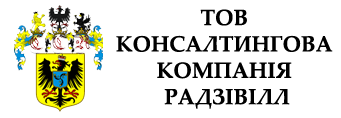
<style>
.page{position:relative;width:341px;height:118px;background:#ffffff}
.page>*{position:absolute;margin:0}
.t1{font:22px "PalatinoLinotype-Bold";color:#000000}
</style>
<div class="page">
<p class="t1" style="left:116px;top:9px;width:217px;height:100px;text-align:center">ТОВ <br>КОНСАЛТИНГОВА <br>КОМПАНІЯ <br>РАДЗІВІЛЛ</p>
</div>
